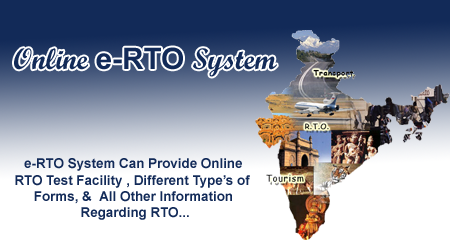
<style>
.page{position:relative;width:450px;height:250px;background:#ffffff}
.page>*{position:absolute;margin:0}
.t1{font:29.7px "ScriptMTBold";color:#122a58}
.t2{font:29.7px "Arial-BoldMT";color:#122a58}
.t3{font:13.4px "Arial-BoldMT";color:#122a58}
</style>
<div class="page">
<p class="t1" style="left:14px;top:47px;width:263px;height:30px">Online <span class="t2">e-RTO </span>System</p>
<p class="t3" style="left:15px;top:158px;width:235px;height:62px;text-align:center">e-RTO System Can Provide Online <br>RTO Test Facility , Different Type’s of <br>Forms, &amp;  All Other Information <br>Regarding RTO...</p>
</div>
